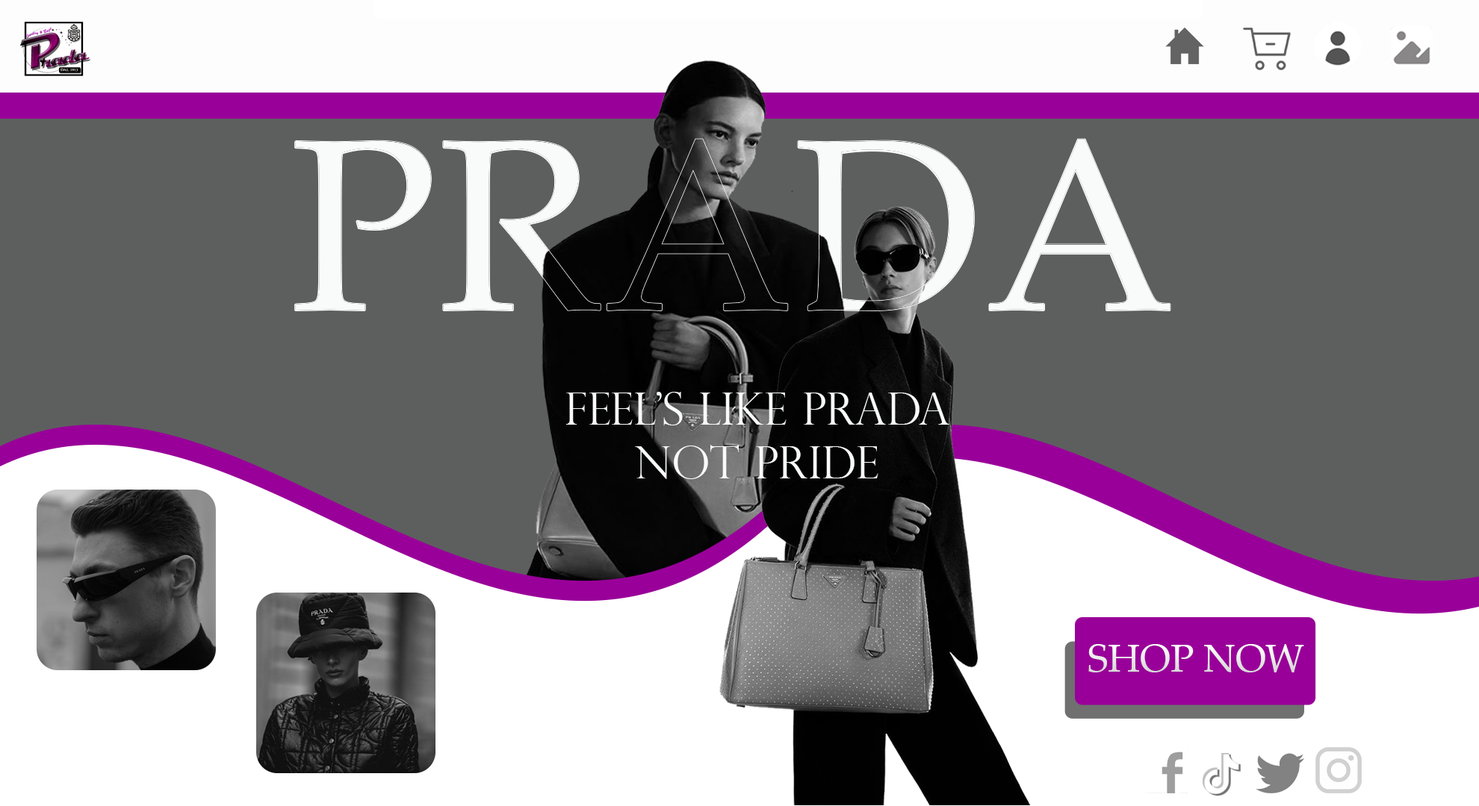
<style>
.page{position:relative;width:1479px;height:806px;background:#5d5f5f}
.page>*{position:absolute;margin:0}
.t1{font:246.4px "PalatinoLinotype-Roman";color:#f9fbfb}
.t2{font:44.8px "PerpetuaTitlingMT-Light";color:#f9fbfb}
.t3{font:38.5px "PalatinoLinotype-Roman";color:#ededed}
</style>
<div class="page">
<p class="t1" style="left:294px;top:139px;width:876px;height:172px">PRADA</p>
<p class="t2" style="left:566px;top:392px;width:383px;height:87px;text-align:center">FEEL’S LIKE PRADA <br>NOT PRIDE</p>
<p class="t3" style="left:1088px;top:644px;width:216px;height:29px">SHOP NOW</p>
</div>
